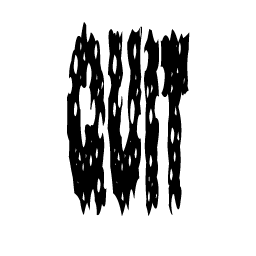
<style>
.page{position:relative;width:256px;height:256px;background:#ffffff}
.page>*{position:absolute;margin:0}
.t1{font:256px "Waterhle";color:#000000;scale:0.2 1}
</style>
<div class="page">
<p class="t1" style="left:67px;top:22px;width:123px;height:194px">QUIT</p>
</div>
